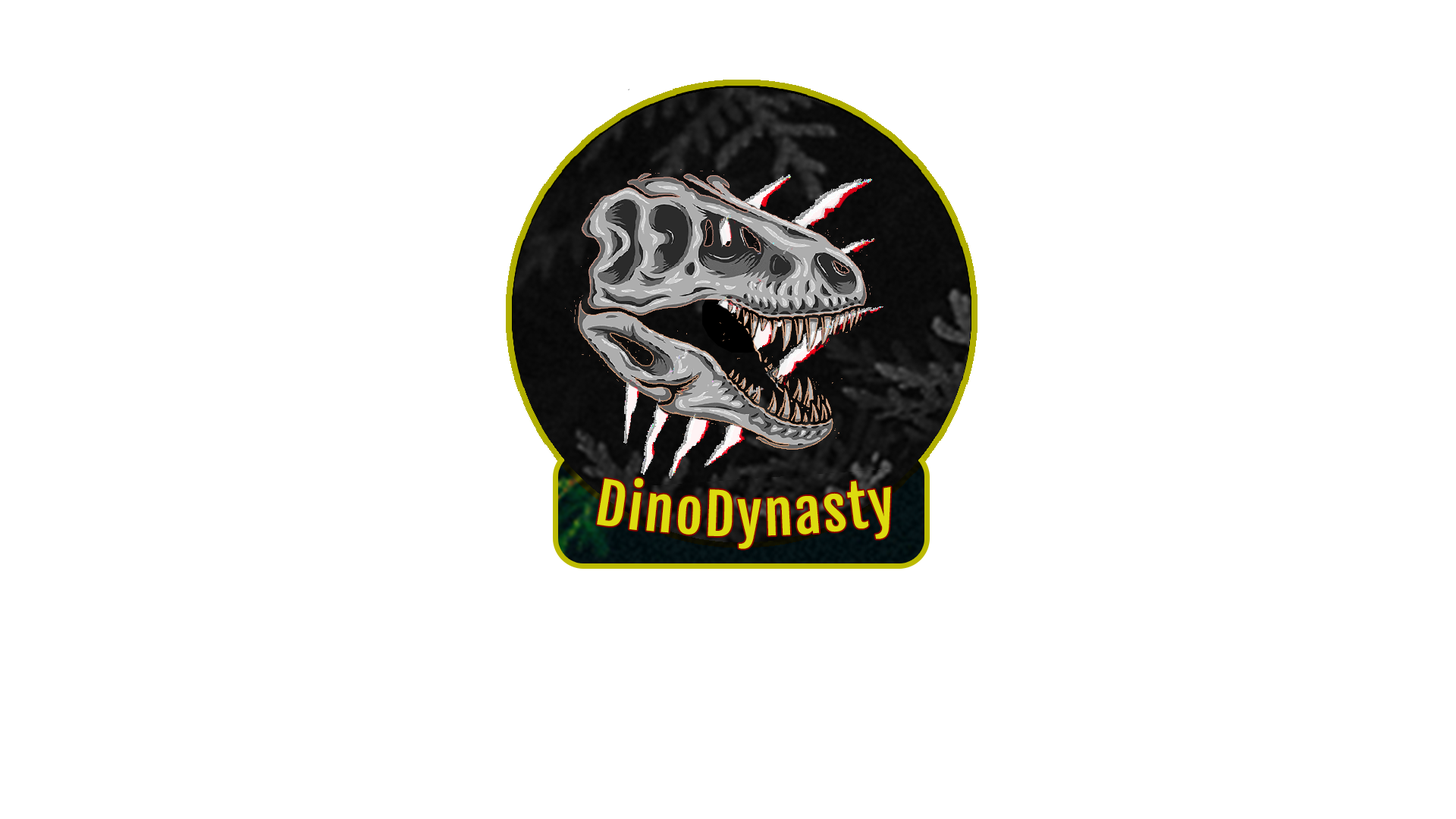
<style>
.page{position:relative;width:1456px;height:819px;background:#ffffff}
.page>*{position:absolute;margin:0}
.t1{font:55.4px "FjallaOne-Regular";letter-spacing:0.04em;color:#dddb0f}
</style>
<div class="page">
<p class="t1" style="left:597px;top:478px;width:294px;height:71px">DinoDynasty</p>
</div>
